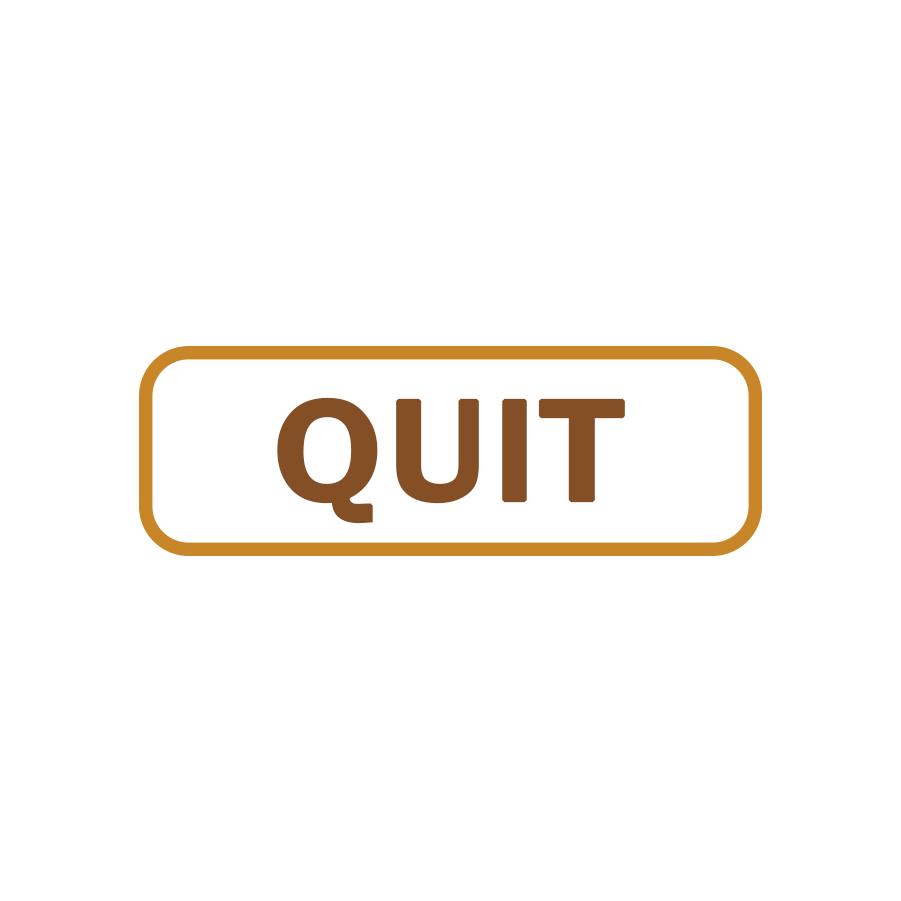
<style>
.page{position:relative;width:901px;height:901px;background:#ffffff}
.page>*{position:absolute;margin:0}
.t1{font:148.7px "FranklinGothic-Medium";color:#844f24;font-weight:bold;scale:1.14 1}
</style>
<div class="page">
<p class="t1" style="left:277px;top:397px;width:348px;height:127px">QUIT</p>
</div>
